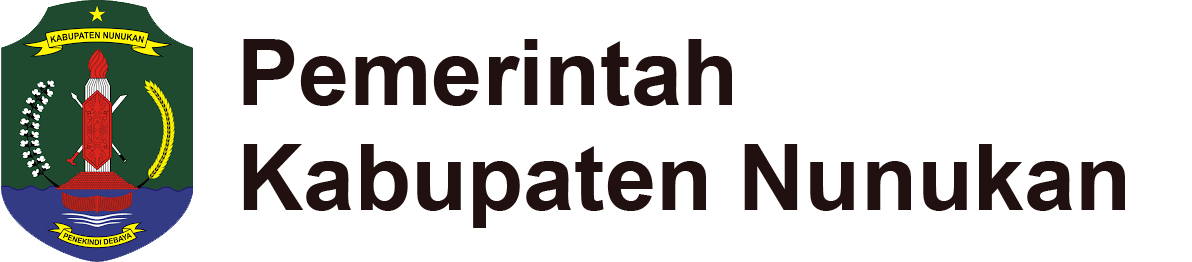
<style>
.page{position:relative;width:1192px;height:262px;background:#ffffff}
.page>*{position:absolute;margin:0}
.t1{font:92px "Arial-BoldMT";color:#201010}
</style>
<div class="page">
<p class="t1" style="left:243px;top:39px;width:489px;height:67px">Pemerintah</p>
<p class="t1" style="left:243px;top:144px;width:882px;height:84px">Kabupaten Nunukan</p>
</div>
